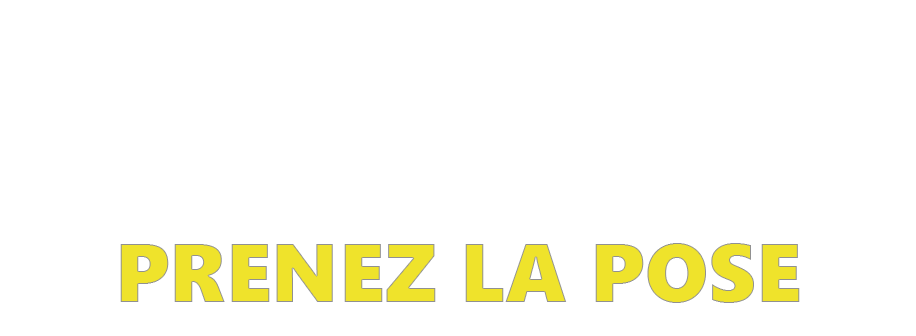
<style>
.page{position:relative;width:916px;height:336px;background:#ffffff}
.page>*{position:absolute;margin:0}
.t1{font:82.9px "SegoeUIBlack";color:#efe32b;text-transform:uppercase}
</style>
<div class="page">
<p class="t1" style="left:120px;top:243px;width:680px;height:60px">PRENEZ LA POSE</p>
</div>
